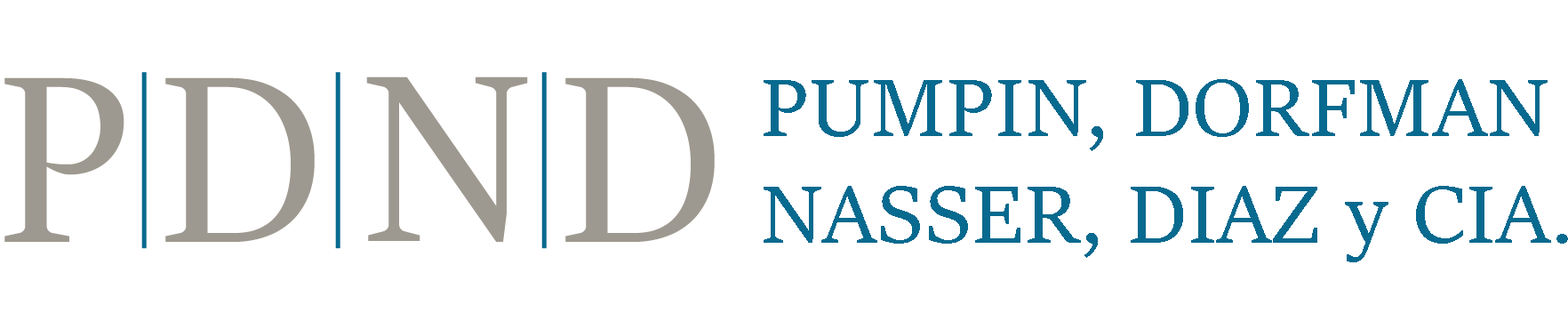
<style>
.page{position:relative;width:1568px;height:329px;background:#ffffff}
.page>*{position:absolute;margin:0}
.t1{font:88.9px "SitkaSubheading";color:#086a8f}
</style>
<div class="page">
<p class="t1" style="left:764px;top:79px;width:804px;height:183px">PUMPIN, DORFMAN<br>NASSER, DIAZ y CIA.</p>
</div>
